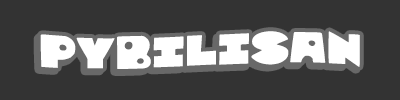
<style>
.page{position:relative;width:400px;height:100px;background:#333333}
.page>*{position:absolute;margin:0}
.t1{font:54px "ZounderkiteExpanded";color:#ffffff}
</style>
<div class="page">
<p class="t1" style="left:37px;top:34px;width:320px;height:38px">PYBILISAN</p>
<p class="t1" style="left:40px;top:31px;width:320px;height:38px">PYBILISAN</p>
</div>
